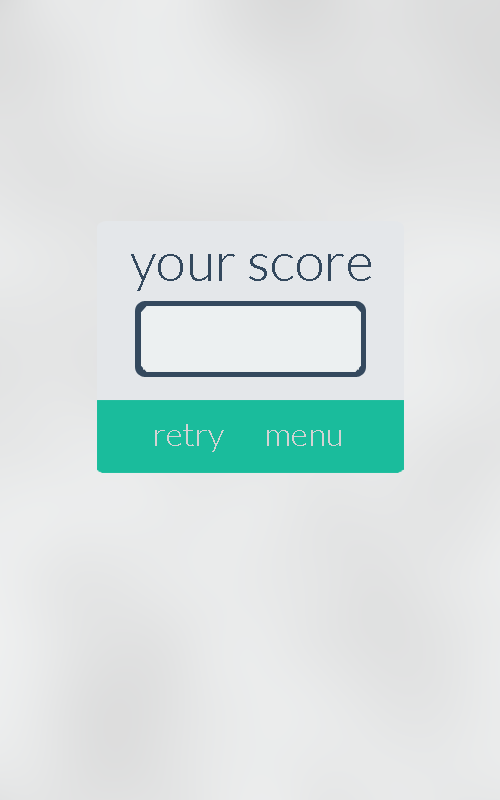
<style>
.page{position:relative;width:500px;height:800px}
.page>*{position:absolute;margin:0}
.t1{font:54.2px "Lato-Light";color:#34495e}
.t2{font:33.3px "Lato-Light";color:#d3d3d3}
</style>
<div class="page">
<p class="t1" style="left:131px;top:254px;width:240px;height:37px">your score</p>
<p class="t2" style="left:155px;top:424px;width:69px;height:28px">retry</p>
<p class="t2" style="left:267px;top:430px;width:74px;height:16px">menu</p>
</div>
